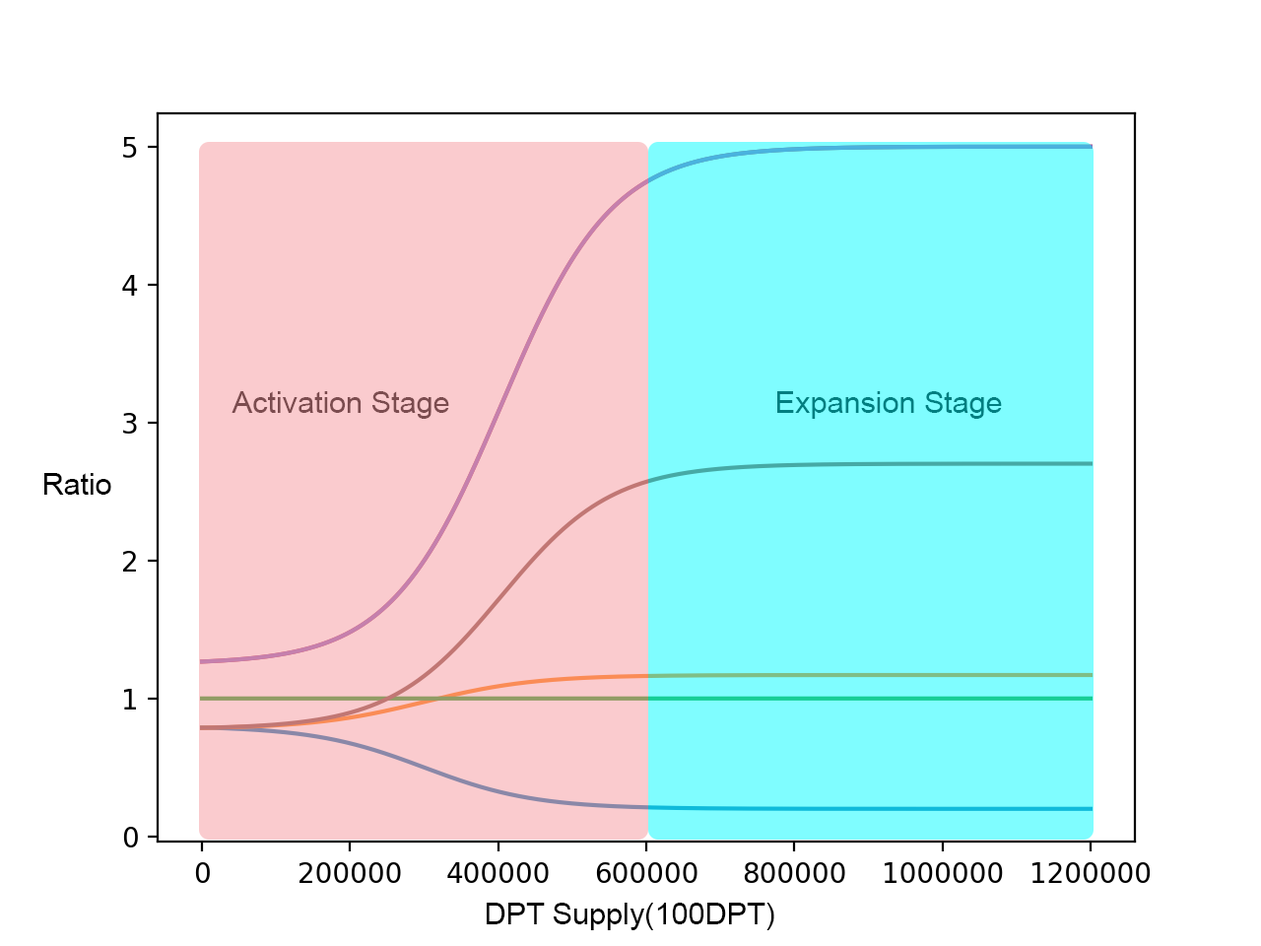
<style>
.page{position:relative;width:1261px;height:946px;background:#ffffff}
.page>*{position:absolute;margin:0}
.t1{font:30.1px "ArialMT";color:#7b4c4f}
.t2{font:30.1px "ArialMT";color:#007e80}
.t3{font:30.1px "ArialMT";color:#000000}
</style>
<div class="page">
<p class="t1" style="left:231px;top:391px;width:218px;height:28px">Activation Stage</p>
<p class="t2" style="left:777px;top:391px;width:225px;height:28px">Expansion Stage</p>
<p class="t3" style="left:44px;top:473px;width:67px;height:22px">Ratio</p>
<p class="t3" style="left:487px;top:902px;width:287px;height:28px">DPT Supply(100DPT)</p>
</div>
